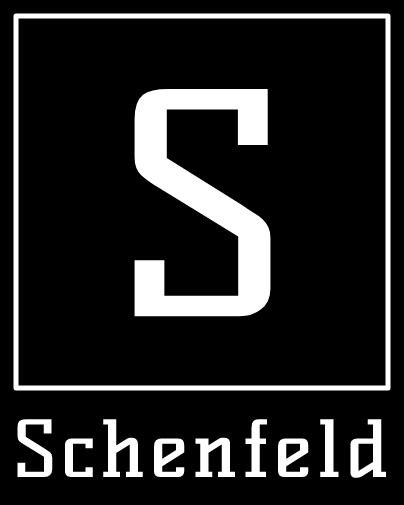
<style>
.page{position:relative;width:404px;height:505px;background:#000000}
.page>*{position:absolute;margin:0}
.t1{font:303px "KellySlab-Regular";color:#ffffff;font-weight:bold}
.t2{font:77px "KellySlab-Regular";letter-spacing:0.055em;color:#ffffff;font-weight:bold}
</style>
<div class="page">
<p class="t1" style="left:134px;top:88px;width:137px;height:229px">S</p>
<p class="t2" style="left:17px;top:419px;width:370px;height:59px">Schenfeld</p>
</div>
